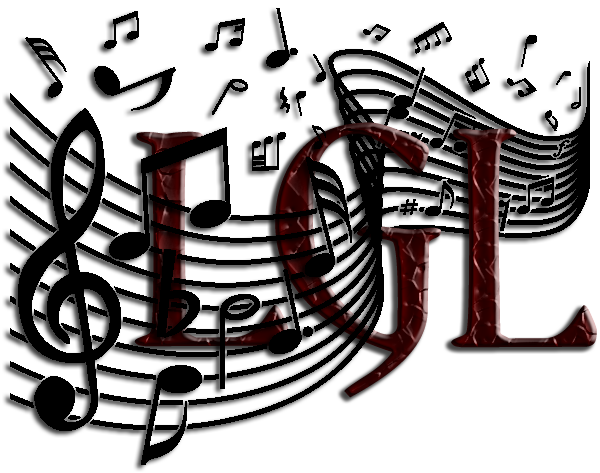
<style>
.page{position:relative;width:600px;height:473px;background:#ffffff}
.page>*{position:absolute;margin:0}
.t1{font:226px "Yataghan";color:#550000;scale:1.47 1}
.t2{font:223.6px "Yataghan";color:#550000;scale:1.48 1}
.t3{font:228px "Yataghan";color:#550000;scale:1.38 1}
</style>
<div class="page">
<p class="t1" style="left:275px;top:122px;width:166px;height:276px">G</p>
<p class="t2" style="left:134px;top:131px;width:155px;height:216px">L</p>
<p class="t3" style="left:451px;top:128px;width:146px;height:220px">L</p>
</div>
